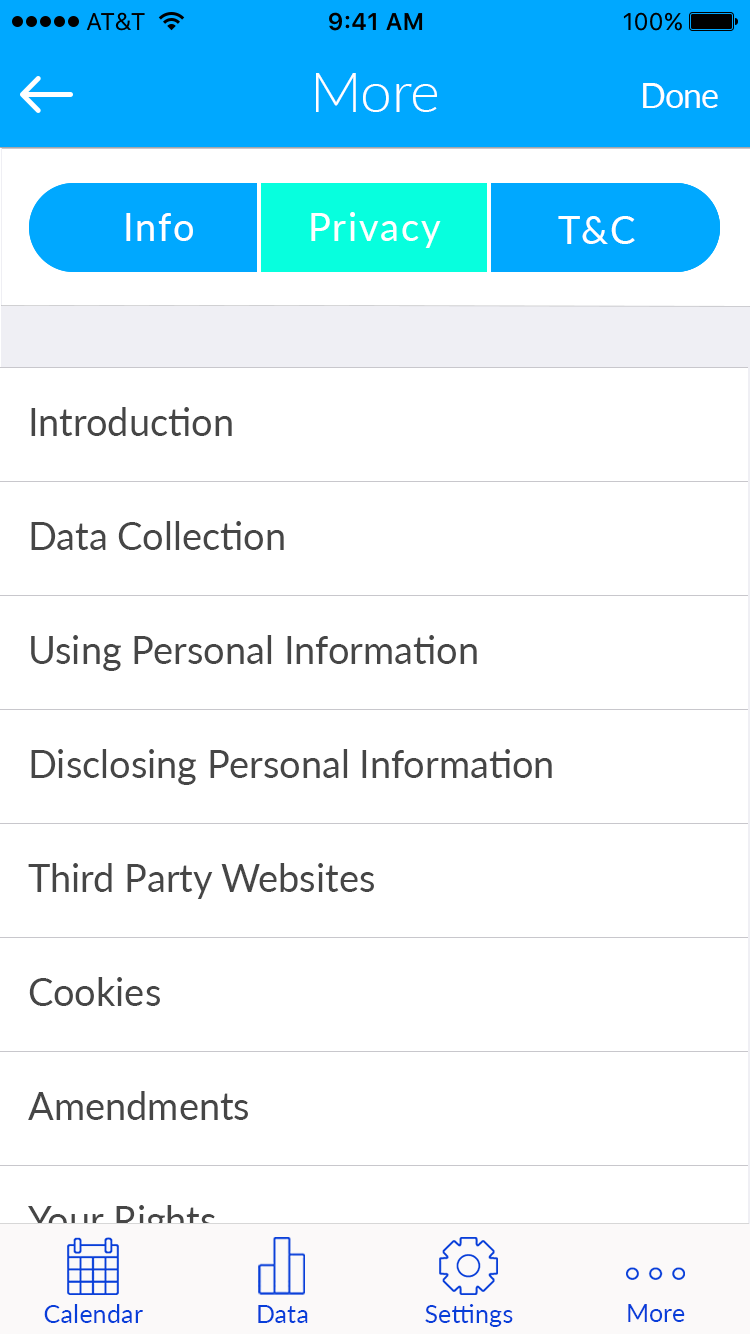
<style>
.page{position:relative;width:750px;height:1334px;background:#ffffff}
.page>*{position:absolute;margin:0}
.t1{font:56.4px "Lato-Light";color:#ffffff}
.t2{font:34px "Lato-Regular";letter-spacing:-0.025em;color:#ffffff}
.t3{font:38px "Lato-Regular";letter-spacing:0.05em;color:#ffffff}
.t4{font:38px "Lato-Regular";color:#464646}
.t5{font:38px "Lato-Regular"}
.t6{font:25px "Lato-Regular";letter-spacing:0.01em;color:#083ed9}
</style>
<div class="page">
<p class="t1" style="left:316px;top:73px;width:121px;height:39px">More</p>
<p class="t2" style="left:643px;top:83px;width:75px;height:25px">Done</p>
<p class="t3" style="left:126px;top:213px;width:67px;height:28px">Info</p>
<p class="t3" style="left:311px;top:212px;width:130px;height:36px">Privacy</p>
<p class="t3" style="left:558px;top:216px;width:77px;height:28px">T&amp;C</p>
<p class="t4" style="left:31px;top:407px;width:201px;height:29px">Introduction</p>
<p class="t4" style="left:31px;top:521px;width:253px;height:29px">Data Collection</p>
<p class="t4" style="left:31px;top:635px;width:446px;height:36px">Using Personal Information</p>
<p class="t4" style="left:31px;top:749px;width:521px;height:36px">Disclosing Personal Information</p>
<p class="t4" style="left:28px;top:863px;width:346px;height:36px">Third Party Websites</p>
<p class="t4" style="left:29px;top:977px;width:131px;height:29px">Cookies</p>
<p class="t4" style="left:28px;top:1091px;width:220px;height:29px">Amendments</p>
<p class="t5" style="left:28px;top:1205px;width:187px;height:36px">Your Rights</p>
<p class="t6" style="left:44px;top:1304px;width:99px;height:19px">Calendar</p>
<p class="t6" style="left:258px;top:1305px;width:50px;height:18px">Data</p>
<p class="t6" style="left:425px;top:1304px;width:88px;height:23px">Settings</p>
<p class="t6" style="left:628px;top:1304px;width:57px;height:18px">More</p>
</div>
